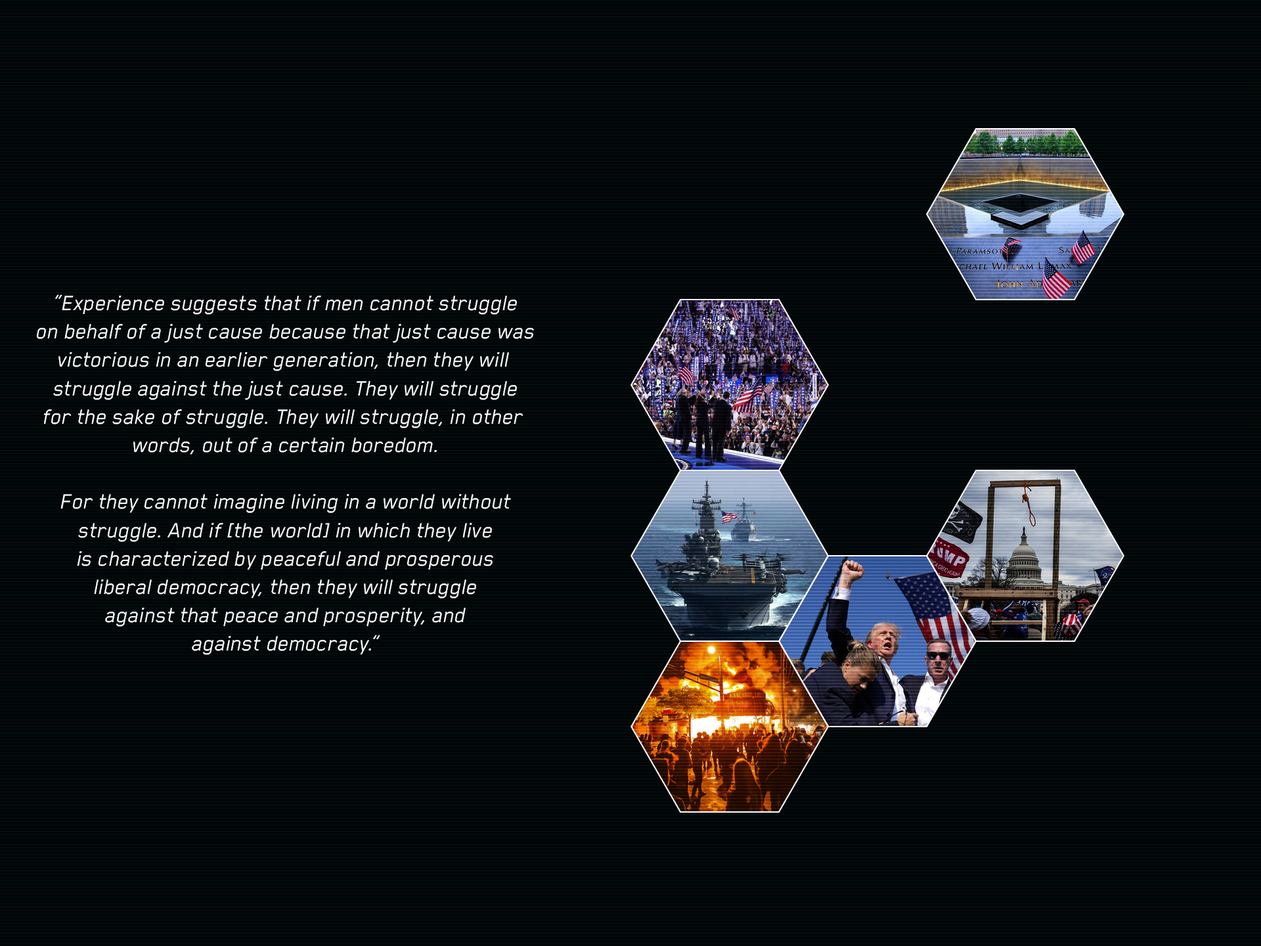
<style>
.page{position:relative;width:1261px;height:946px}
.page>*{position:absolute;margin:0}
.t1{font:23.6px "BlenderPro-BookItalic";color:#ffffff}
</style>
<div class="page">
<p class="t1" style="left:36px;top:294px;width:498px;height:361px;text-align:center">“Experience suggests that if men cannot struggle<br>on behalf of a just cause because that just cause was<br>victorious in an earlier generation, then they will <br>struggle against the just cause. They will struggle<br>for the sake of struggle. They will struggle, in other <br>words, out of a certain boredom.<br><br>For they cannot imagine living in a world without<br>struggle. And if [the world] in which they live<br>is characterized by peaceful and prosperous<br>liberal democracy, then they will struggle<br>against that peace and prosperity, and<br>against democracy.”</p>
</div>
